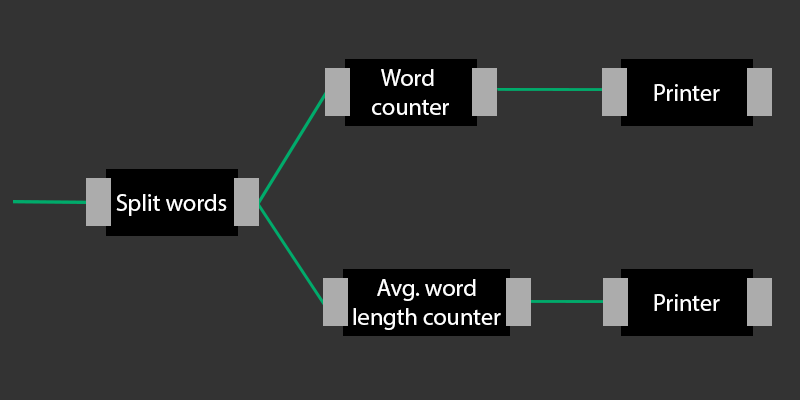
<style>
.page{position:relative;width:800px;height:400px;background:#333333}
.page>*{position:absolute;margin:0}
.t1{font:24px "MyriadPro-Regular";color:#ffffff}
</style>
<div class="page">
<p class="t1" style="left:372px;top:69px;width:77px;height:46px;text-align:center">Word <br>counter</p>
<p class="t1" style="left:654px;top:84px;width:66px;height:17px">Printer</p>
<p class="t1" style="left:116px;top:194px;width:111px;height:22px">Split words</p>
<p class="t1" style="left:353px;top:279px;width:148px;height:51px;text-align:center">Avg. word<br>length counter</p>
<p class="t1" style="left:654px;top:294px;width:66px;height:17px">Printer</p>
</div>
